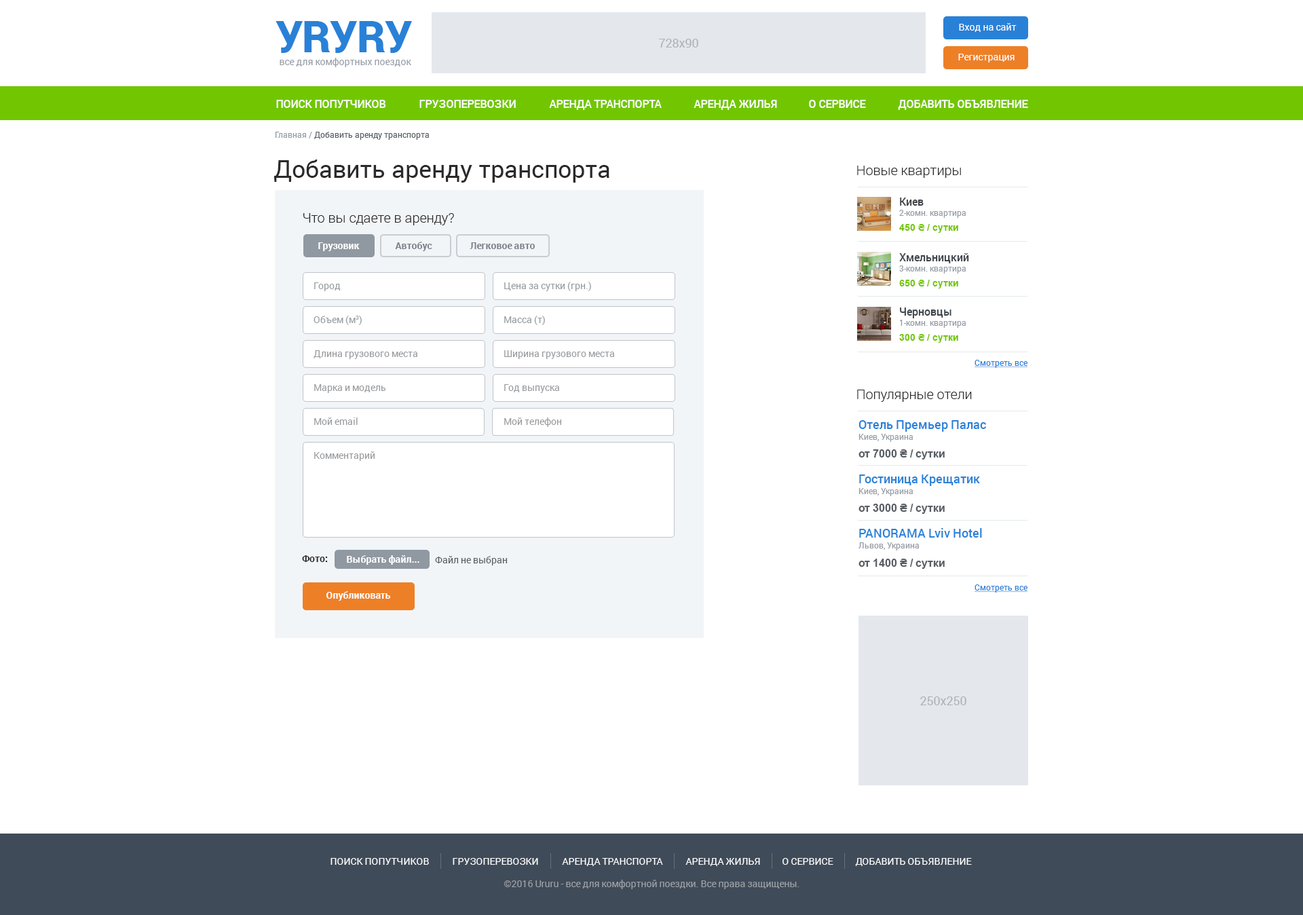
<style>
.page{position:relative;width:1303px;height:915px;background:#ffffff}
.page>*{position:absolute;margin:0}
.t1{font:43.4px "Roboto-Black";letter-spacing:-0.01em;color:#2981d7}
.t2{font:9.5px "Roboto-Regular";color:#ffffff}
.t3{font:12.2px "Roboto-Regular";color:#acb2b8}
.t4{font:9.5px "Roboto-Regular";color:#949ca5}
.t5{font:10.9px "Roboto-Medium";color:#ffffff;text-transform:uppercase}
.t6{font:8.1px "Roboto-Regular";color:#585e64}
.t7{font:8.1px "Roboto-Regular";color:#949ca5}
.t8{font:24.4px "Roboto-Regular";color:#2a2a2a}
.t9{font:13.6px "Roboto-Light";color:#2a2a2a}
.t10{font:10.9px "Roboto-Medium";color:#3f454b}
.t11{font:9.5px "Arial-BoldMT";color:#72c601}
.t12{font:9.5px "Roboto-Bold";color:#ffffff}
.t13{font:9.5px "Roboto-Bold";color:#7c838b}
.t14{font:9.5px "Roboto-Regular";color:#989b9e}
.t15{font:8.1px "Roboto-Regular";color:#2981d7;text-decoration:underline}
.t16{font:12.2px "Roboto-Medium";color:#2981d7}
.t17{font:10.9px "Arial-BoldMT";color:#585e64}
.t18{font:9.5px "Roboto-Bold";color:#2a2a2a}
.t19{font:9.5px "Roboto-Regular";color:#585e64}
.t20{font:9.5px "Roboto-Regular";color:#ffffff;text-transform:uppercase}
.t21{font:9.5px "Roboto-Regular";color:#9ca0a6}
</style>
<div class="page">
<p class="t1" style="left:276px;top:21px;width:136px;height:32px">УRУRУ</p>
<p class="t2" style="left:959px;top:23px;width:58px;height:9px">Вход на сайт</p>
<p class="t3" style="left:659px;top:39px;width:39px;height:9px">728x90</p>
<p class="t2" style="left:958px;top:54px;width:57px;height:8px">Регистрация</p>
<p class="t4" style="left:280px;top:58px;width:131px;height:9px">все для комфортных поездок</p>
<p class="t5" style="left:276px;top:100px;width:110px;height:8px">Поиск попутчиков</p>
<p class="t5" style="left:419px;top:100px;width:97px;height:8px">грузоперевозки</p>
<p class="t5" style="left:549px;top:100px;width:113px;height:10px">Аренда транспорта</p>
<p class="t5" style="left:694px;top:100px;width:83px;height:10px">Аренда жилья</p>
<p class="t5" style="left:809px;top:100px;width:57px;height:8px">о сервисе</p>
<p class="t5" style="left:898px;top:100px;width:130px;height:10px">добавить объявление</p>
<p class="t6" style="left:275px;top:132px;width:154px;height:8px"><span class="t7">Главная /</span> Добавить аренду транспорта</p>
<p class="t8" style="left:274px;top:160px;width:336px;height:23px">Добавить аренду транспорта</p>
<p class="t9" style="left:857px;top:166px;width:104px;height:12px">Новые квартиры</p>
<p class="t10" style="left:900px;top:198px;width:24px;height:8px">Киев</p>
<p class="t7" style="left:899px;top:210px;width:67px;height:8px">2-комн. квартира</p>
<p class="t9" style="left:303px;top:213px;width:151px;height:12px">Что вы сдаете в аренду?</p>
<p class="t11" style="left:899px;top:224px;width:59px;height:9px">450 ₴ / сутки</p>
<p class="t12" style="left:318px;top:242px;width:42px;height:9px">Грузовик</p>
<p class="t13" style="left:395px;top:242px;width:37px;height:9px">Автобус</p>
<p class="t13" style="left:470px;top:242px;width:65px;height:7px">Легковое авто</p>
<p class="t10" style="left:899px;top:253px;width:70px;height:10px">Хмельницкий</p>
<p class="t7" style="left:899px;top:265px;width:67px;height:9px">3-комн. квартира</p>
<p class="t14" style="left:504px;top:282px;width:87px;height:9px">Цена за сутки (грн.)</p>
<p class="t11" style="left:899px;top:280px;width:59px;height:8px">650 ₴ / сутки</p>
<p class="t14" style="left:314px;top:282px;width:27px;height:9px">Город</p>
<p class="t14" style="left:314px;top:315px;width:48px;height:10px">Объем (м3)</p>
<p class="t14" style="left:504px;top:316px;width:41px;height:9px">Масса (т)</p>
<p class="t10" style="left:900px;top:307px;width:52px;height:11px">Черновцы</p>
<p class="t7" style="left:900px;top:320px;width:66px;height:8px">1-комн. квартира</p>
<p class="t11" style="left:899px;top:334px;width:59px;height:9px">300 ₴ / сутки</p>
<p class="t14" style="left:314px;top:350px;width:103px;height:9px">Длина грузового места</p>
<p class="t14" style="left:504px;top:350px;width:110px;height:9px">Ширина грузового места</p>
<p class="t15" style="left:975px;top:360px;width:53px;height:8px">Смотреть все</p>
<p class="t14" style="left:314px;top:384px;width:72px;height:9px">Марка и модель</p>
<p class="t14" style="left:504px;top:384px;width:55px;height:9px">Год выпуска</p>
<p class="t9" style="left:857px;top:390px;width:115px;height:12px">Популярные отели</p>
<p class="t14" style="left:314px;top:417px;width:44px;height:8px">Мой email</p>
<p class="t14" style="left:504px;top:417px;width:58px;height:10px">Мой телефон</p>
<p class="t16" style="left:859px;top:420px;width:127px;height:12px">Отель Премьер Палас</p>
<p class="t7" style="left:859px;top:434px;width:54px;height:8px">Киев, Украина</p>
<p class="t17" style="left:859px;top:449px;width:86px;height:11px">от 7000 ₴ / сутки</p>
<p class="t14" style="left:314px;top:451px;width:61px;height:10px">Комментарий</p>
<p class="t16" style="left:859px;top:474px;width:121px;height:12px">Гостиница Крещатик</p>
<p class="t7" style="left:859px;top:488px;width:54px;height:8px">Киев, Украина</p>
<p class="t17" style="left:859px;top:504px;width:86px;height:10px">от 3000 ₴ / сутки</p>
<p class="t16" style="left:859px;top:528px;width:123px;height:10px">PANORAMA Lviv Hotel</p>
<p class="t7" style="left:859px;top:542px;width:60px;height:8px">Львов, Украина</p>
<p class="t18" style="left:302px;top:555px;width:26px;height:7px">Фото:</p>
<p class="t12" style="left:347px;top:555px;width:72px;height:10px">Выбрать файл...</p>
<p class="t19" style="left:435px;top:556px;width:73px;height:9px">Файл не выбран</p>
<p class="t17" style="left:859px;top:559px;width:86px;height:10px">от 1400 ₴ / сутки</p>
<p class="t12" style="left:326px;top:591px;width:65px;height:10px">Опубликовать</p>
<p class="t15" style="left:975px;top:584px;width:53px;height:9px">Смотреть все</p>
<p class="t3" style="left:920px;top:696px;width:47px;height:9px">250х250</p>
<p class="t20" style="left:331px;top:858px;width:98px;height:7px">Поиск попутчиков</p>
<p class="t20" style="left:453px;top:858px;width:85px;height:7px">грузоперевозки</p>
<p class="t20" style="left:562px;top:858px;width:101px;height:8px">Аренда транспорта</p>
<p class="t20" style="left:686px;top:858px;width:74px;height:8px">Аренда жилья</p>
<p class="t20" style="left:783px;top:858px;width:51px;height:7px">о сервисе</p>
<p class="t20" style="left:855px;top:858px;width:117px;height:8px">добавить объявление</p>
<p class="t21" style="left:504px;top:880px;width:296px;height:9px">©2016 Ururu - все для комфортной поездки. Все права защищены.</p>
</div>
